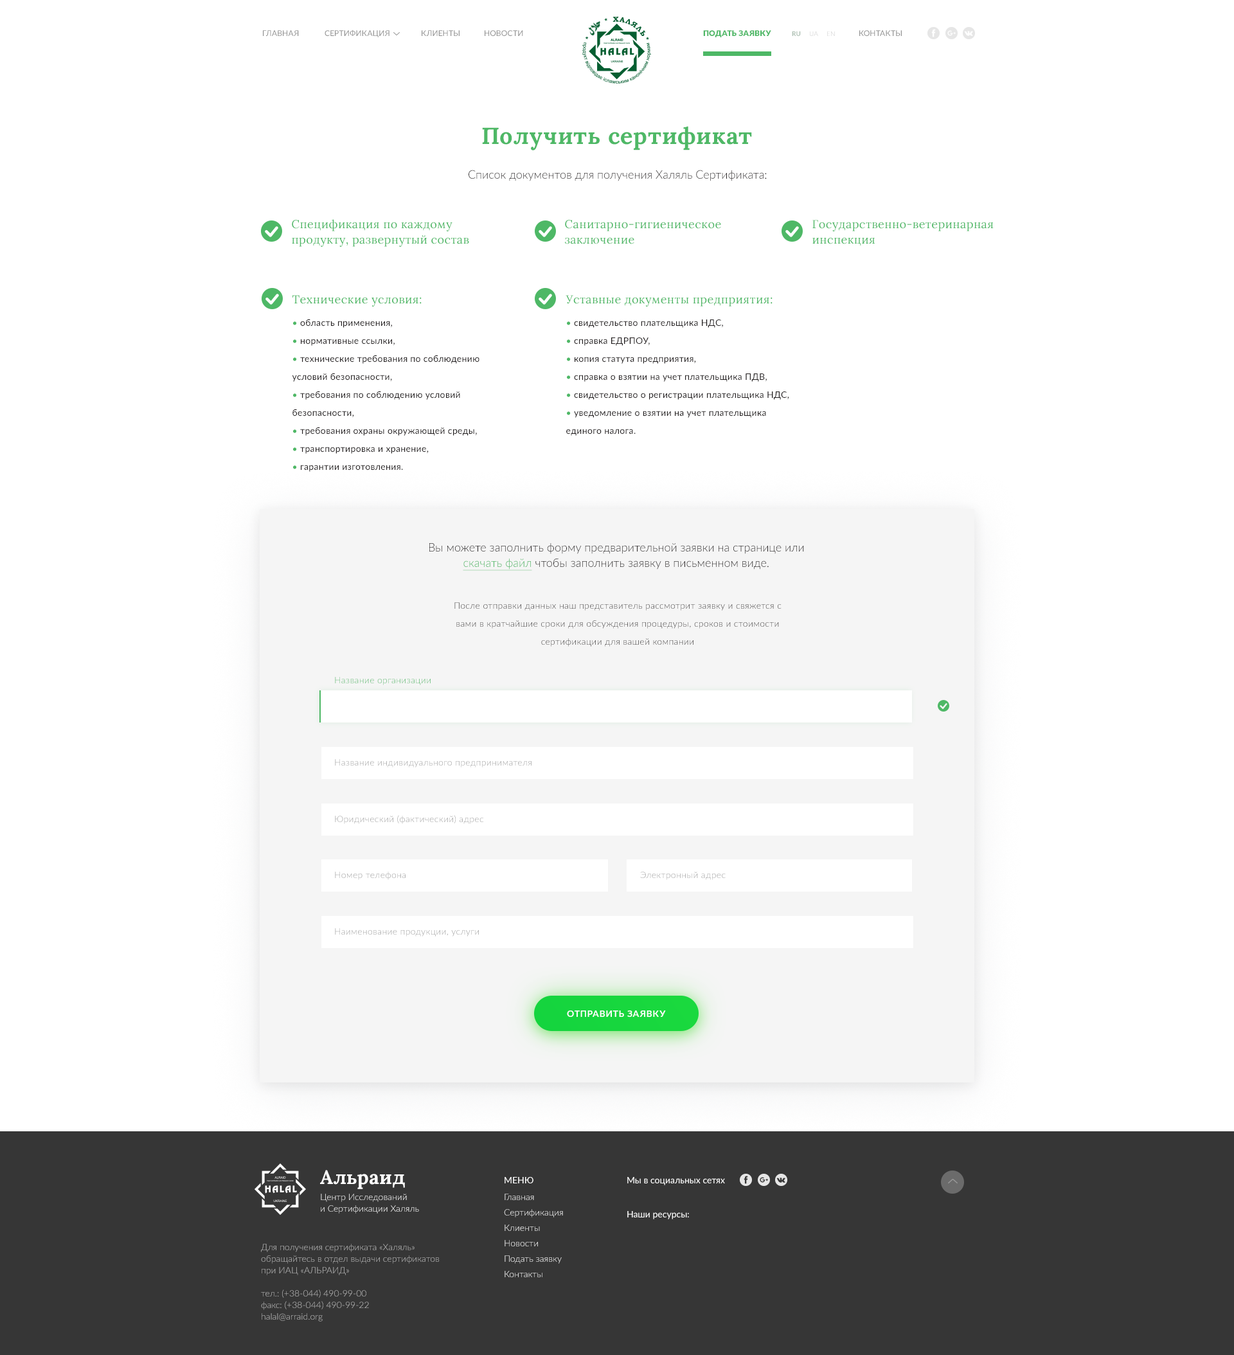
<style>
.page{position:relative;width:1234px;height:1355px;background:#ffffff}
.page>*{position:absolute;margin:0}
.t1{font:7.7px "Lato-Regular";letter-spacing:0.02em;color:#919191;text-transform:uppercase}
.t2{font:7.7px "Lato-Black";letter-spacing:0.02em;color:#4eb866;text-transform:uppercase}
.t3{font:6.4px "Lato-Bold";letter-spacing:0.02em;color:#adc0b3;text-transform:uppercase}
.t4{font:6.4px "Lato-Light";letter-spacing:0.02em;text-transform:uppercase}
.t5{font:23.1px "Lora-Bold";letter-spacing:0.025em;color:#4eb866}
.t6{font:11.6px "Lato-Light";color:#231f20}
.t7{font:11.6px/15.4px "Lora-Regular";letter-spacing:0.025em;color:#4eb866}
.t8{font:11.6px "Lora-Regular";letter-spacing:0.025em;color:#4eb866}
.t9{font:9px/18px "Lato-Regular";letter-spacing:0.025em;color:#231f20}
.t10{font:9px/18px "Lato-Regular";letter-spacing:0.025em;color:#4eb866}
.t11{font:11.6px/15.4px "Lato-Light";color:#231f20}
.t12{font:11.6px/15.4px "Lato-Light";color:#4eb866;text-decoration:underline}
.t13{font:9px/18px "Lato-Light";letter-spacing:0.025em}
.t14{font:9px "Lato-Light";letter-spacing:0.025em}
.t15{font:9px "Lato-Light";letter-spacing:0.025em;color:#999999}
.t16{font:9px "Lato-Bold";letter-spacing:0.05em;color:#ffffff;text-transform:uppercase}
.t17{font:19.3px "Lora-Bold";letter-spacing:0.02em;color:#ffffff}
.t18{font:9px "Lato-Regular";color:#ffffff}
.t19{font:9px/11.6px "Lato-Light"}
.t20{font:9px/15.4px "Lato-Light"}
.t21{font:9px/11.6px "Lato-Light";color:#bcbcbc}
</style>
<div class="page">
<p class="t1" style="left:325px;top:30px;width:65px;height:7px">Сертификация</p>
<p class="t1" style="left:263px;top:30px;width:36px;height:6px">Главная</p>
<p class="t1" style="left:422px;top:30px;width:38px;height:6px">Клиенты</p>
<p class="t1" style="left:485px;top:30px;width:38px;height:6px">Новости</p>
<p class="t2" style="left:703px;top:30px;width:68px;height:7px">Подать заявку</p>
<p class="t3" style="left:792px;top:31px;width:9px;height:5px">RU</p>
<p class="t4" style="left:810px;top:32px;width:8px;height:4px">Ua</p>
<p class="t4" style="left:827px;top:32px;width:8px;height:4px">EN</p>
<p class="t1" style="left:860px;top:30px;width:42px;height:6px">Контакты</p>
<p class="t5" style="left:482px;top:126px;width:270px;height:24px">Получить сертификат</p>
<p class="t6" style="left:469px;top:170px;width:298px;height:11px">Список документов для получения Халяль Сертификата:</p>
<p class="t7" style="left:292px;top:219px;width:177px;height:28px">Спецификация по каждому <br>продукту, развернутый состав</p>
<p class="t7" style="left:565px;top:220px;width:156px;height:24px">Санитарно-гигиеническое заключение</p>
<p class="t7" style="left:813px;top:220px;width:181px;height:26px">Государственно-ветеринарная инспекция</p>
<p class="t8" style="left:292px;top:295px;width:130px;height:12px">Технические условия:</p>
<p class="t8" style="left:566px;top:295px;width:207px;height:12px">Уставные документы предприятия:</p>
<p class="t9" style="left:292px;top:319px;width:188px;height:153px"><span class="t10">• </span>область применения,<br><span class="t10">• </span>нормативные ссылки,<br><span class="t10">• </span>технические требования по соблюдению условий безопасности,<br><span class="t10">• </span>требования по соблюдению условий безопасности, <br><span class="t10">• </span>требования охраны окружающей среды, <br><span class="t10">• </span>транспортировка и хранение,<br><span class="t10">• </span>гарантии изготовления.</p>
<p class="t9" style="left:566px;top:320px;width:223px;height:116px"><span class="t10">•</span> свидетельство плательщика НДС,<br><span class="t10">•</span> справка ЕДРПОУ,<br><span class="t10">•</span> копия статута предприятия,<br><span class="t10">•</span> справка о взятии на учет плательщика ПДВ,<br><span class="t10">•</span> свидетельство о регистрации плательщика НДС,<br><span class="t10">•</span> уведомление о взятии на учет плательщика единого налога.</p>
<p class="t11" style="left:429px;top:543px;width:375px;height:28px;text-align:center">Вы можете заполнить форму предварительной заявки на странице или <br><span class="t12">скачать файл </span>чтобы заполнить заявку в письменном виде.</p>
<p class="t13" style="left:455px;top:602px;width:327px;height:45px;text-align:center">После отправки данных наш представитель рассмотрит заявку и свяжется с вами в кратчайшие сроки для обсуждения процедуры, сроков и стоимости сертификации для вашей компании</p>
<p class="t14" style="left:335px;top:677px;width:96px;height:8px">Название организации</p>
<p class="t15" style="left:335px;top:759px;width:197px;height:9px">Название индивидуального предпринимателя</p>
<p class="t15" style="left:335px;top:815px;width:148px;height:9px">Юридический (фактический) адрес</p>
<p class="t15" style="left:335px;top:872px;width:71px;height:8px">Номер телефона</p>
<p class="t15" style="left:640px;top:872px;width:86px;height:8px">Электронный адрес</p>
<p class="t15" style="left:335px;top:928px;width:144px;height:9px">Наименование продукции, услуги</p>
<p class="t16" style="left:567px;top:1011px;width:99px;height:6px">отправить заявку</p>
<p class="t17" style="left:320px;top:1170px;width:85px;height:19px">Альраид</p>
<p class="t18" style="left:505px;top:1177px;width:29px;height:7px">МЕНЮ</p>
<p class="t18" style="left:627px;top:1177px;width:98px;height:8px">Мы в социальных сетях</p>
<p class="t19" style="left:321px;top:1194px;width:98px;height:20px">Центр Исследований <br>и Сертификации Халяль</p>
<p class="t20" style="left:504px;top:1194px;width:59px;height:83px">Главная<br>Сертификация<br>Клиенты<br>Новости<br>Подать заявку<br>Контакты</p>
<p class="t18" style="left:627px;top:1211px;width:62px;height:9px">Наши ресурсы:</p>
<p class="t21" style="left:261px;top:1244px;width:179px;height:78px">Для получения сертификата «Халяль» <br>обращайтесь в отдел выдачи сертификатов <br>при ИАЦ «АЛЬРАИД»<br><br>тел.: (+38-044) 490-99-00<br>факс: (+38-044) 490-99-22<br>halal@arraid.org</p>
</div>
